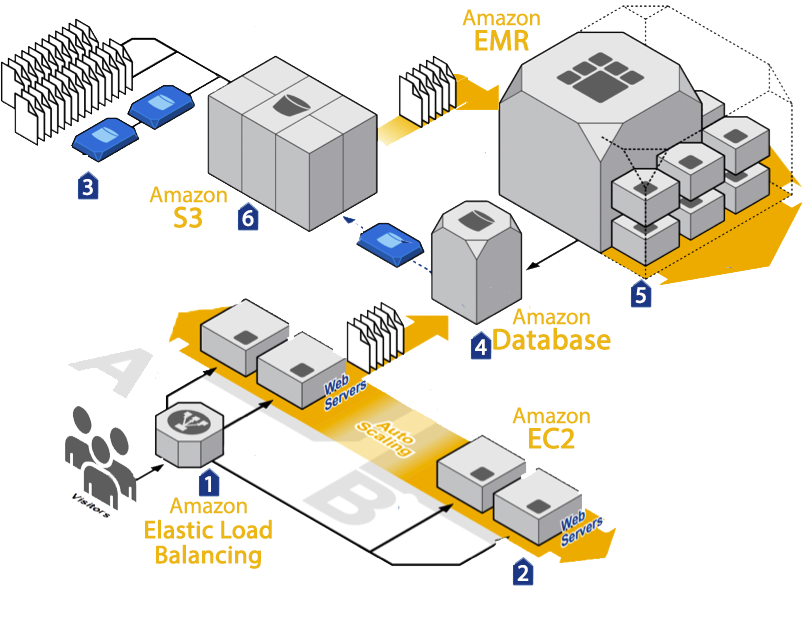
<style>
.page{position:relative;width:803px;height:617px;background:#ffffff}
.page>*{position:absolute;margin:0}
.t1{font:22.9px/25px "MyriadPro-Regular";color:#ecb614}
.t2{font:29.2px/25px "MyriadPro-Regular";color:#ecb614;font-weight:bold}
.t3{font:22.9px "MyriadPro-Regular";color:#ffffff;font-weight:bold}
.t4{font:25px/25px "MyriadPro-Regular";color:#ecb614;font-weight:bold}
</style>
<div class="page">
<p class="t1" style="left:462px;top:9px;width:78px;height:42px;text-align:center">Amazon<br><span class="t2">EMR</span></p>
<p class="t3" style="left:82px;top:179px;width:11px;height:17px">3</p>
<p class="t1" style="left:149px;top:186px;width:78px;height:42px;text-align:center">Amazon<br><span class="t2">S3</span></p>
<p class="t3" style="left:242px;top:210px;width:12px;height:17px">6</p>
<p class="t3" style="left:635px;top:287px;width:11px;height:17px">5</p>
<p class="t2" style="left:493px;top:308px;width:118px;height:42px;text-align:center"><span class="t1">Amazon<br></span>Database</p>
<p class="t3" style="left:475px;top:339px;width:12px;height:16px">4</p>
<p class="t1" style="left:512px;top:407px;width:78px;height:42px;text-align:center">Amazon<br><span class="t2">EC2</span></p>
<p class="t3" style="left:205px;top:476px;width:6px;height:16px">1</p>
<p class="t4" style="left:145px;top:497px;width:127px;height:72px;text-align:center"><span class="t1">Amazon<br></span>Elastic Load <br>Balancing</p>
<p class="t3" style="left:517px;top:565px;width:12px;height:16px">2</p>
</div>
